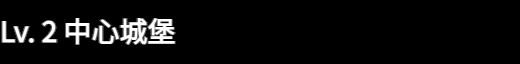
<style>
.page{position:relative;width:520px;height:64px;background:#000000}
.page>*{position:absolute;margin:0}
.t1{font:28px/28px "WebPSD-18463539-0-Regular";color:#ffffff;font-weight:bold}
</style>
<div class="page">
<p class="t1" style="left:0px;top:0px;width:520px;height:64px">Lv. 2 中心城堡</p>
</div>
